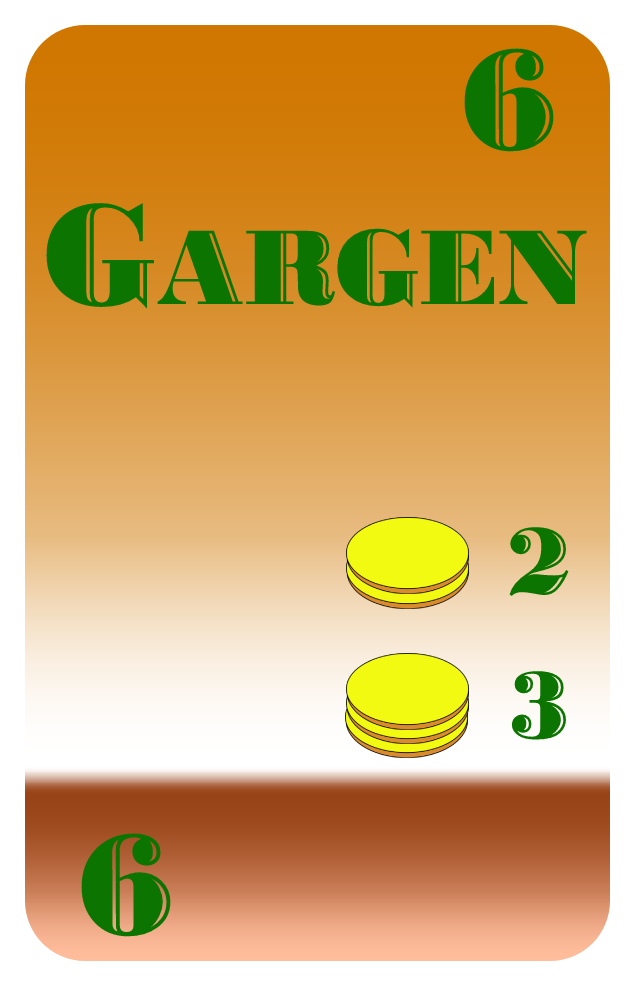
<style>
.page{position:relative;width:635px;height:986px}
.page>*{position:absolute;margin:0}
.t1{font:150px "BodoniHighlightICG";color:#0c7501}
.t2{font:112px "BodoniHighlightICG";color:#0c7501}
.t3{font:100px "BodoniHighlightICG";color:#0c7501}
</style>
<div class="page">
<p class="t1" style="left:464px;top:48px;width:90px;height:104px">6</p>
<p class="t2" style="left:46px;top:203px;width:541px;height:106px"><span class="t1">G</span>ARGEN</p>
<p class="t3" style="left:509px;top:527px;width:60px;height:69px">2</p>
<p class="t3" style="left:511px;top:671px;width:55px;height:69px">3</p>
<p class="t1" style="left:81px;top:833px;width:90px;height:104px">6</p>
</div>
